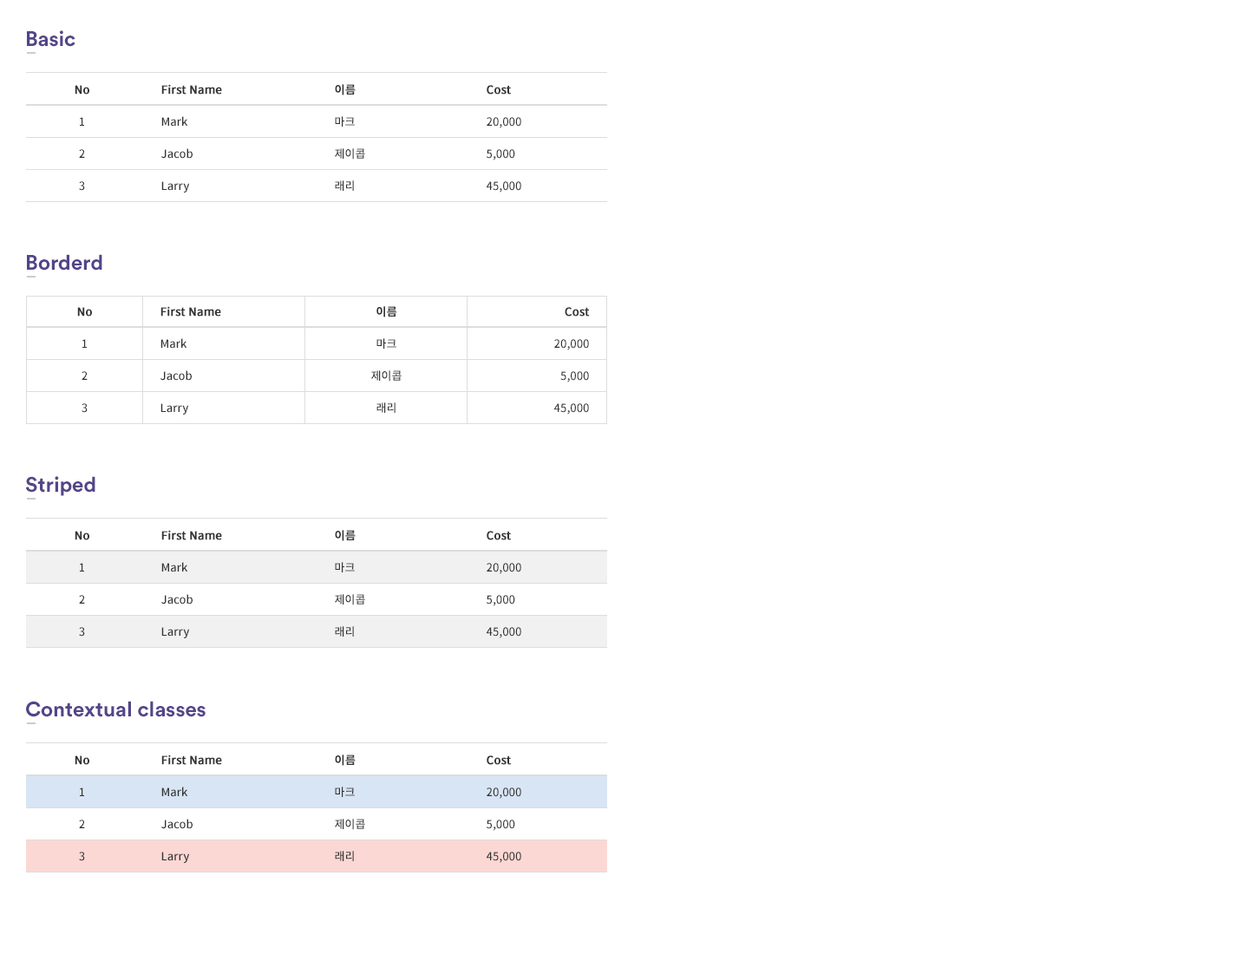
<style>
.page{position:relative;width:1249px;height:954px;background:#ffffff}
.page>*{position:absolute;margin:0}
.t1{font:20.8px "CircularStd-Bold";color:#534588}
.t2{font:11.3px/32.1px "SourceHanSansKR-Medium";color:#333333}
.t3{font:11.3px/32.1px "SourceHanSansKR-Medium";color:#333333;font-weight:bold}
</style>
<div class="page">
<p class="t1" style="left:27px;top:30px;width:48px;height:17px">Basic</p>
<p class="t2" style="left:75px;top:85px;width:14px;height:106px;text-align:center"><span class="t3">No<br></span>1<br>2<br>3</p>
<p class="t2" style="left:161px;top:84px;width:61px;height:109px"><span class="t3">First Name<br></span>Mark<br>Jacob<br>Larry</p>
<p class="t2" style="left:335px;top:84px;width:30px;height:107px"><span class="t3">이름<br></span>마크<br>제이콥<br>래리</p>
<p class="t2" style="left:487px;top:85px;width:34px;height:108px"><span class="t3">Cost</span><br>20,000<br>5,000<br>45,000</p>
<p class="t1" style="left:27px;top:254px;width:75px;height:17px">Borderd</p>
<p class="t2" style="left:77px;top:307px;width:15px;height:106px;text-align:center"><span class="t3">No<br></span>1<br>2<br>3</p>
<p class="t2" style="left:161px;top:306px;width:60px;height:109px"><span class="t3">First Name<br></span>Mark<br>Jacob<br>Larry</p>
<p class="t2" style="left:371px;top:306px;width:31px;height:107px;text-align:center"><span class="t3">이름<br></span>마크<br>제이콥<br>래리</p>
<p class="t2" style="left:554px;top:307px;width:36px;height:108px;text-align:right"><span class="t3">Cost</span><br>20,000<br>5,000<br>45,000</p>
<p class="t1" style="left:26px;top:476px;width:69px;height:20px">Striped</p>
<p class="t2" style="left:75px;top:531px;width:14px;height:106px;text-align:center"><span class="t3">No<br></span>1<br>2<br>3</p>
<p class="t2" style="left:161px;top:530px;width:61px;height:109px"><span class="t3">First Name<br></span>Mark<br>Jacob<br>Larry</p>
<p class="t2" style="left:335px;top:530px;width:30px;height:107px"><span class="t3">이름<br></span>마크<br>제이콥<br>래리</p>
<p class="t2" style="left:487px;top:531px;width:34px;height:108px"><span class="t3">Cost</span><br>20,000<br>5,000<br>45,000</p>
<p class="t1" style="left:26px;top:701px;width:180px;height:17px">Contextual classes</p>
<p class="t2" style="left:75px;top:756px;width:14px;height:106px;text-align:center"><span class="t3">No<br></span>1<br>2<br>3</p>
<p class="t2" style="left:161px;top:755px;width:61px;height:108px"><span class="t3">First Name<br></span>Mark<br>Jacob<br>Larry</p>
<p class="t2" style="left:335px;top:755px;width:30px;height:107px"><span class="t3">이름<br></span>마크<br>제이콥<br>래리</p>
<p class="t2" style="left:487px;top:756px;width:34px;height:107px"><span class="t3">Cost</span><br>20,000<br>5,000<br>45,000</p>
</div>
